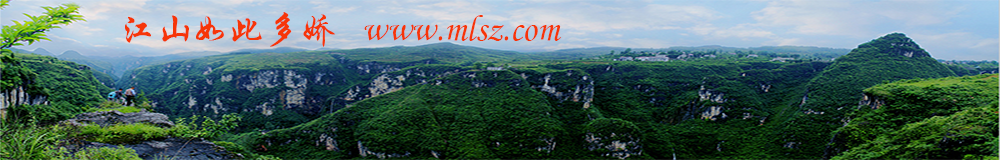
<style>
.page{position:relative;width:1000px;height:160px}
.page>*{position:absolute;margin:0}
.t1{font:36px "STLiti";color:#f63508}
.t2{font:36px "STXingkai";color:#f63508}
</style>
<div class="page">
<p class="t1" style="left:125px;top:12px;width:436px;height:35px"><span class="t2">江山如此多娇   </span>www.mlsz.com</p>
</div>
